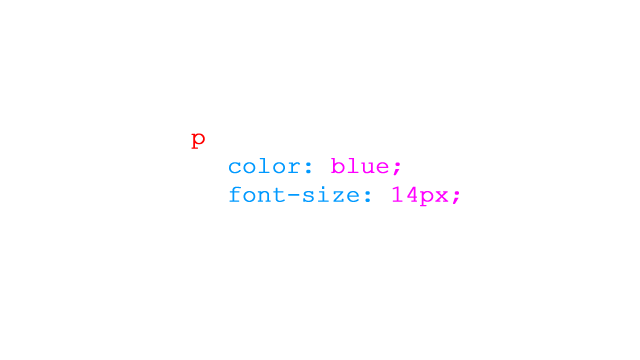
<style>
.page{position:relative;width:640px;height:360px;background:#ffffff}
.page>*{position:absolute;margin:0}
.t1{font:24px "CourierNewPSMT";letter-spacing:-0.01em;color:#0099ff;font-weight:bold}
.t2{font:24px "CourierNewPSMT";letter-spacing:-0.01em;color:#ff0000;font-weight:bold}
.t3{font:24px "CourierNewPSMT";letter-spacing:-0.01em;color:#ffffff;font-weight:bold}
.t4{font:24px "CourierNewPSMT";letter-spacing:-0.01em;color:#ff00ff;font-weight:bold}
</style>
<div class="page">
<p class="t1" style="left:191px;top:129px;width:268px;height:105px"><span class="t2">p</span><span class="t3"> {<br> </span>color: <span class="t4">blue;<br> </span>font-size: <span class="t4">14px;<br></span><span class="t3">}</span></p>
</div>
